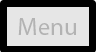
<style>
.page{position:relative;width:96px;height:52px;background:#e6e6e6}
.page>*{position:absolute;margin:0}
.t1{font:25px "MyriadPro-Regular";color:#b3b3b3}
</style>
<div class="page">
<p class="t1" style="left:18px;top:18px;width:58px;height:17px">Menu</p>
</div>
